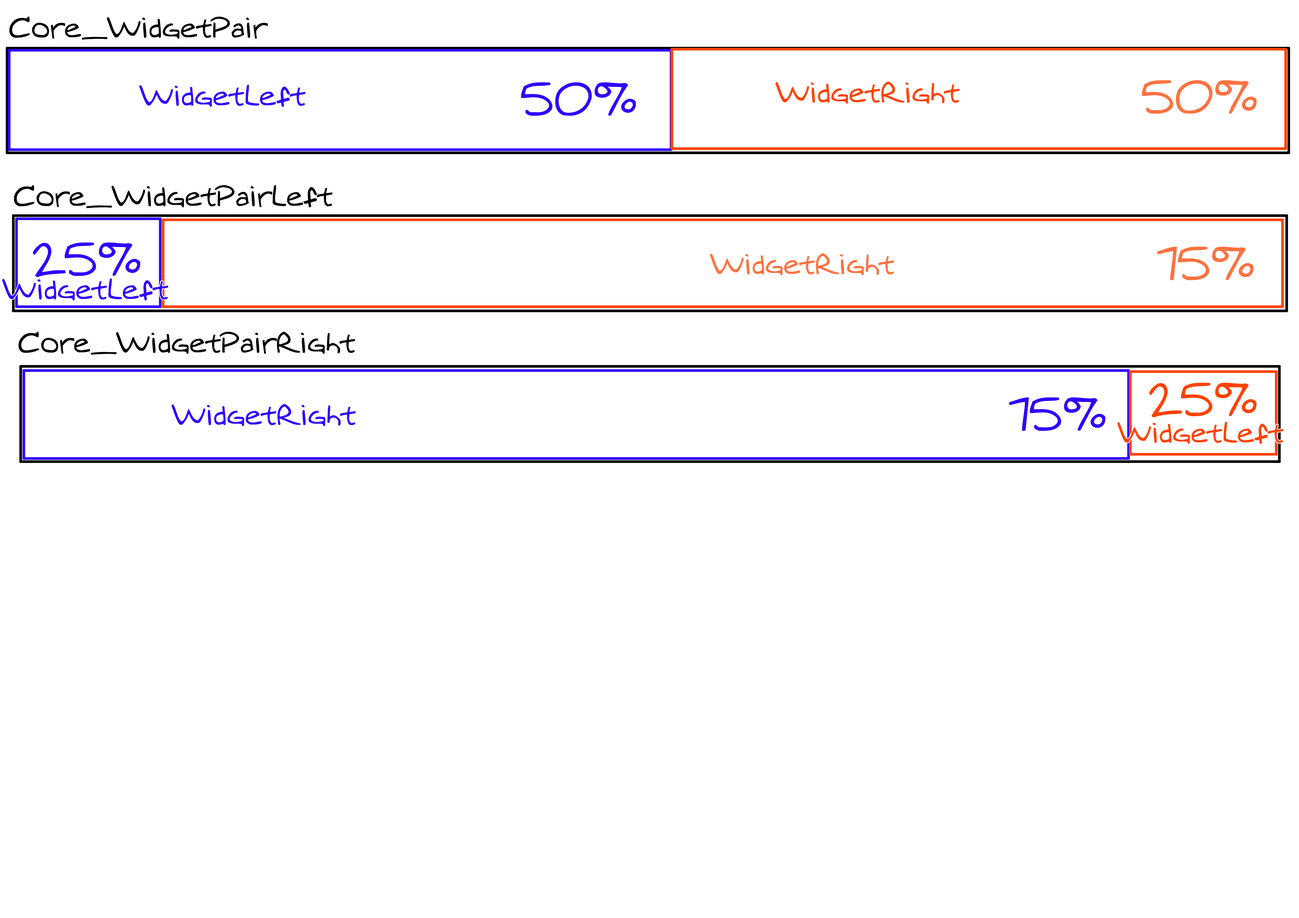
<style>
.page{position:relative;width:1299px;height:918px;background:#ffffff}
.page>*{position:absolute;margin:0}
.t1{font:27.3px "MTOaugie-Regular";color:#000000}
.t2{font:27.3px "MTOaugie-Regular";color:#3000ff}
.t3{font:43.6px "MTOaugie-Regular";color:#3000ff}
.t4{font:27.3px "MTOaugie-Regular";color:#ff4300}
.t5{font:43.6px "MTOaugie-Regular";color:#ff7240}
.t6{font:27.3px "MTOaugie-Regular";color:#ff7240}
.t7{font:43.6px "MTOaugie-Regular";color:#ff4300}
</style>
<div class="page">
<p class="t1" style="left:9px;top:16px;width:259px;height:24px">Core_WidgetPair</p>
<p class="t2" style="left:139px;top:85px;width:166px;height:22px">WidgetLeft</p>
<p class="t3" style="left:521px;top:82px;width:115px;height:34px">50%</p>
<p class="t4" style="left:775px;top:81px;width:184px;height:23px">WidgetRight</p>
<p class="t5" style="left:1141px;top:80px;width:115px;height:34px">50%</p>
<p class="t1" style="left:14px;top:185px;width:318px;height:23px">Core_WidgetPairLeft</p>
<p class="t3" style="left:32px;top:242px;width:108px;height:35px">25%</p>
<p class="t6" style="left:710px;top:253px;width:184px;height:23px">WidgetRight</p>
<p class="t5" style="left:1157px;top:247px;width:96px;height:33px">75%</p>
<p class="t2" style="left:2px;top:278px;width:166px;height:23px">WidgetLeft</p>
<p class="t1" style="left:18px;top:332px;width:337px;height:23px">Core_WidgetPairRight</p>
<p class="t7" style="left:1149px;top:383px;width:107px;height:35px">25%</p>
<p class="t3" style="left:1009px;top:397px;width:96px;height:34px">75%</p>
<p class="t2" style="left:171px;top:404px;width:185px;height:22px">WidgetRight</p>
<p class="t4" style="left:1117px;top:422px;width:166px;height:22px">WidgetLeft</p>
</div>
